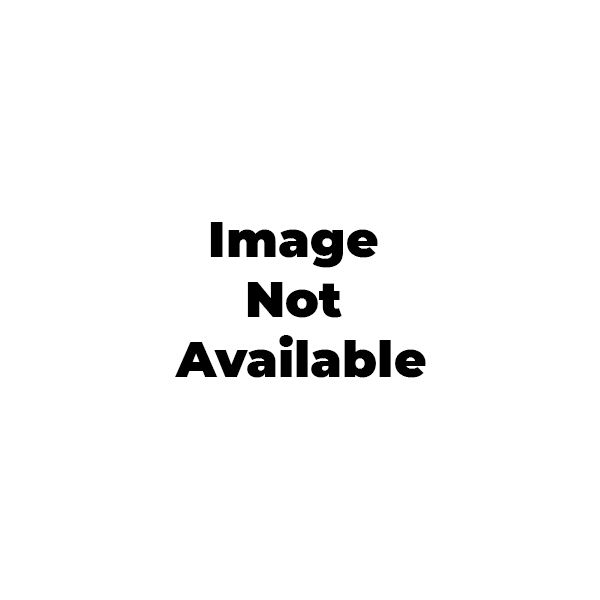
<style>
.page{position:relative;width:600px;height:600px;background:#ffffff}
.page>*{position:absolute;margin:0}
.t1{font:12px "Montserrat-Black";color:#000000}
</style>
<div class="page">
<p class="t1" style="left:175px;top:222px;width:251px;height:156px;text-align:center">Image <br>Not <br>Available</p>
</div>
